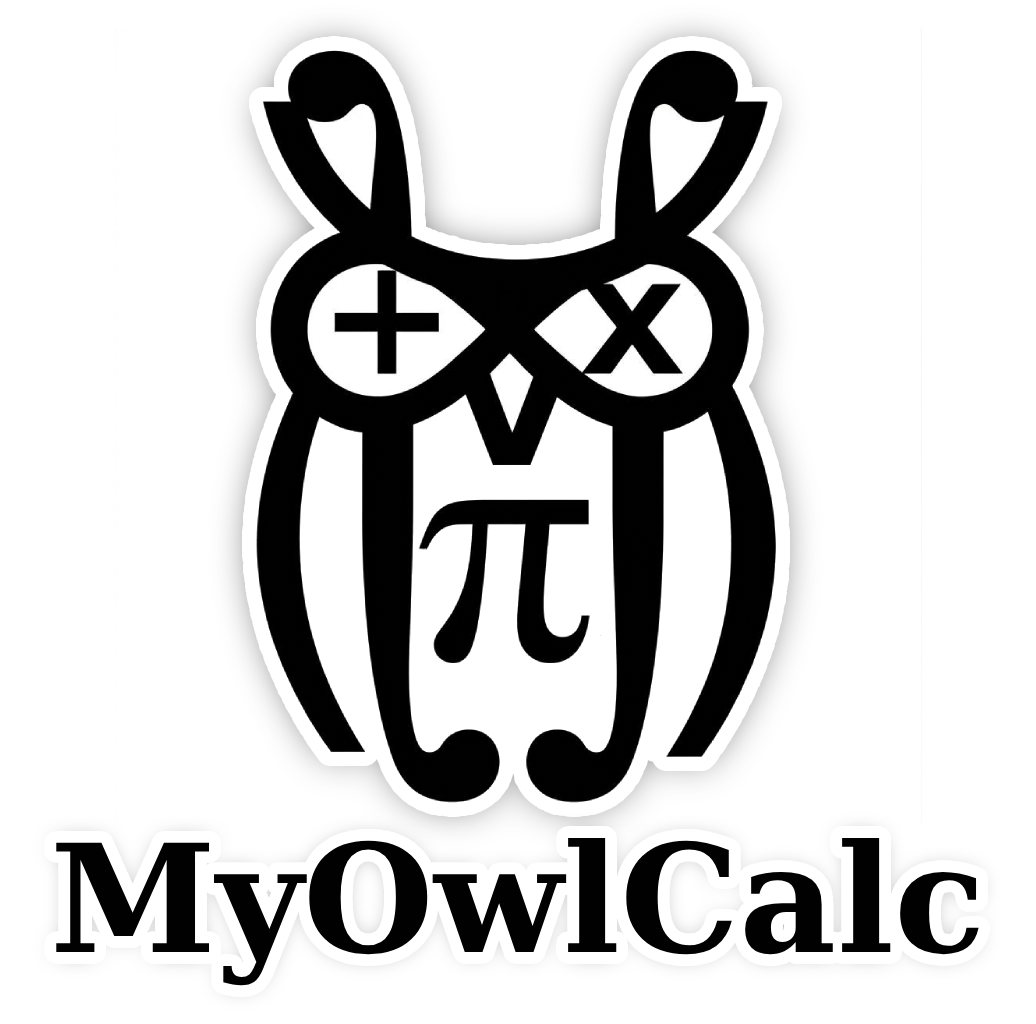
<style>
.page{position:relative;width:1036px;height:1024px;background:#ffffff}
.page>*{position:absolute;margin:0}
.t1{font:150px "DejaVuSerif-Bold";color:#010101}
</style>
<div class="page">
<p class="t1" style="left:56px;top:838px;width:923px;height:148px">MyOwlCalc</p>
</div>
